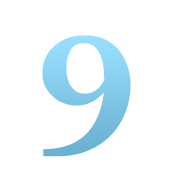
<style>
.page{position:relative;width:192px;height:192px;background:#ffffff}
.page>*{position:absolute;margin:0}
.t1{font:164.4px "PerpetuaTitlingMT-Bold";color:#81d7ff}
</style>
<div class="page">
<p class="t1" style="left:42px;top:35px;width:89px;height:122px">9</p>
</div>
